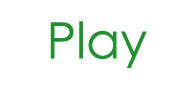
<style>
.page{position:relative;width:193px;height:87px;background:#ffffff}
.page>*{position:absolute;margin:0}
.t1{font:50px "CenturyGothic";color:#1f922f}
</style>
<div class="page">
<p class="t1" style="left:50px;top:21px;width:97px;height:47px">Play</p>
</div>
